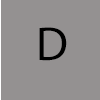
<style>
.page{position:relative;width:100px;height:100px;background:#949191}
.page>*{position:absolute;margin:0}
.t1{font:48px "MyriadPro-Regular";color:#000000}
</style>
<div class="page">
<p class="t1" style="left:39px;top:27px;width:28px;height:34px">D</p>
</div>
